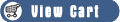
<style>
.page{position:relative;width:120px;height:22px;background:#3e5e89}
.page>*{position:absolute;margin:0}
.t1{font:17.1px "AuroraBT-BoldCondensed";letter-spacing:0.075em;color:#ffffff;font-weight:bold;scale:0.89 1}
</style>
<div class="page">
<p class="t1" style="left:31px;top:5px;width:68px;height:13px">View Cart</p>
</div>
